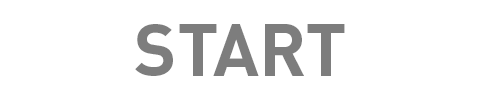
<style>
.page{position:relative;width:500px;height:100px;background:#ffffff}
.page>*{position:absolute;margin:0}
.t1{font:72px "DINPro-Bold";color:#7d7d7d}
</style>
<div class="page">
<p class="t1" style="left:135px;top:24px;width:210px;height:52px">START</p>
</div>
